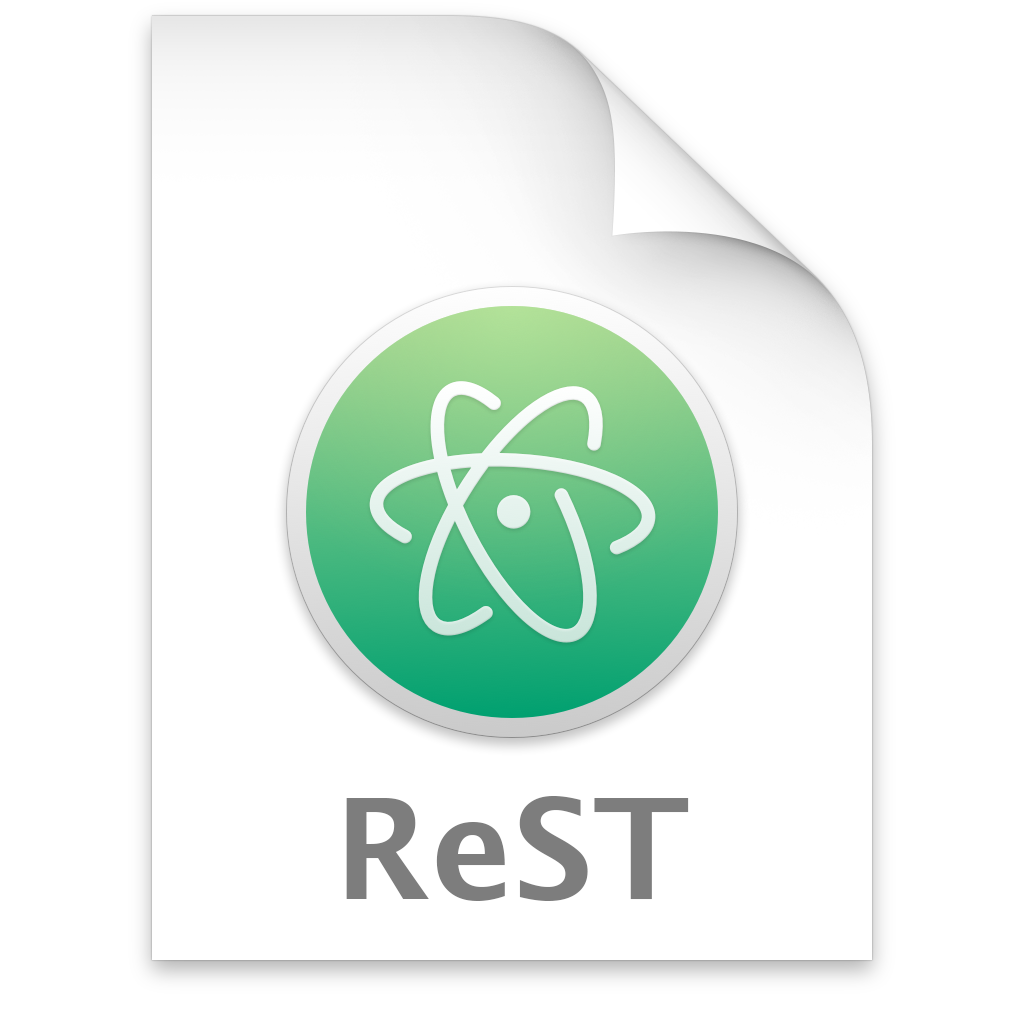
<style>
.page{position:relative;width:1024px;height:1024px;background:#ffffff}
.page>*{position:absolute;margin:0}
.t1{font:140px "LucidaGrande-Bold";color:#7d7d7d}
</style>
<div class="page">
<p class="t1" style="left:346px;top:796px;width:343px;height:105px">ReST</p>
</div>
